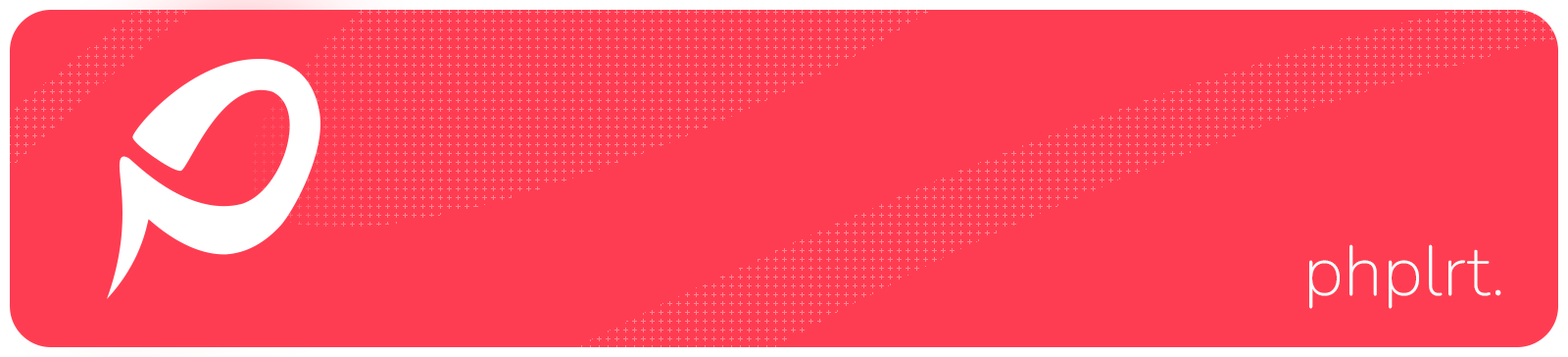
<style>
.page{position:relative;width:1568px;height:357px;background:#ff3d52}
.page>*{position:absolute;margin:0}
.t1{font:70.6px "Nunito-ExtraLight";color:#ffffff}
</style>
<div class="page">
<p class="t1" style="left:1309px;top:244px;width:192px;height:65px">phplrt.</p>
</div>
